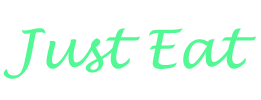
<style>
.page{position:relative;width:261px;height:100px;background:#ffffff}
.page>*{position:absolute;margin:0}
.t1{font:53px "LucidaHandwriting-Italic";color:#51f894}
</style>
<div class="page">
<p class="t1" style="left:3px;top:28px;width:253px;height:51px">Just Eat</p>
</div>
